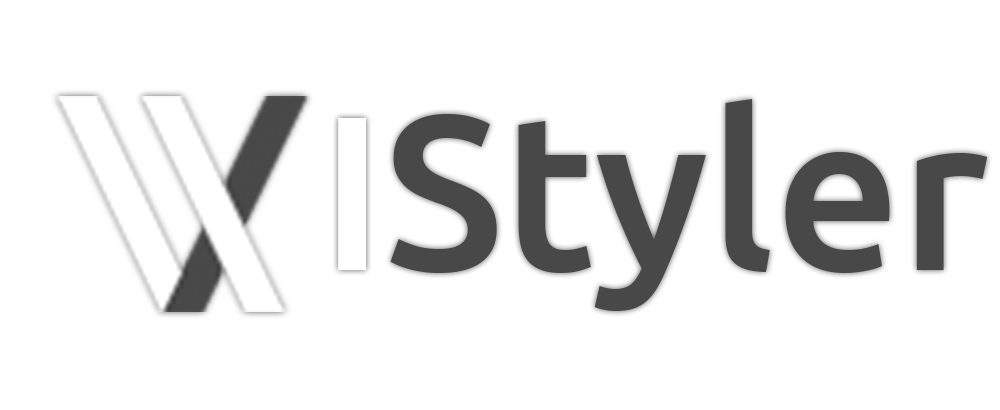
<style>
.page{position:relative;width:1000px;height:410px;background:#ffffff}
.page>*{position:absolute;margin:0}
.t1{font:220px "Ubuntu-Medium";color:#484848}
.t2{font:220px "Ubuntu-Medium";color:#ffffff}
</style>
<div class="page">
<p class="t1" style="left:338px;top:99px;width:650px;height:212px"><span class="t2">I</span>Styler</p>
</div>
